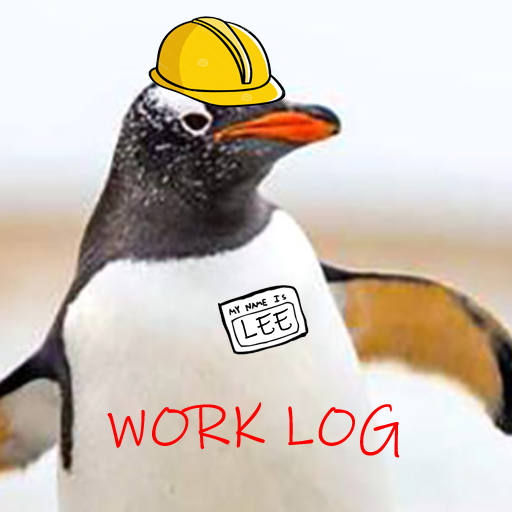
<style>
.page{position:relative;width:512px;height:512px}
.page>*{position:absolute;margin:0}
.t1{font:30px "InkFree";color:#000000}
.t2{font:60px "InkFree";color:#ff0000}
</style>
<div class="page">
<p class="t1" style="left:241px;top:308px;width:51px;height:31px;rotate:-14deg">LEE</p>
<p class="t2" style="left:107px;top:402px;width:293px;height:56px">WORK LOG</p>
</div>
